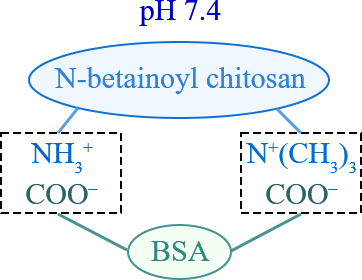
<style>
.page{position:relative;width:362px;height:280px;background:#ffffff}
.page>*{position:absolute;margin:0}
.t1{font:30px "TimesNewRomanPSMT";color:#0000cc}
.t2{font:30px "TimesNewRomanPSMT";color:#2d81d7}
.t3{font:30px "TimesNewRomanPSMT";color:#0066cc}
.t4{font:30px "TimesNewRomanPSMT";color:#006dd0}
.t5{font:30px "TimesNewRomanPSMT";color:#286666}
.t6{font:30px "TimesNewRomanPSMT";color:#2f897d}
</style>
<div class="page">
<p class="t1" style="left:139px;top:0px;width:82px;height:26px">pH 7.4</p>
<p class="t2" style="left:54px;top:67px;width:252px;height:27px">N-betainoyl chitosan</p>
<p class="t3" style="left:31px;top:143px;width:62px;height:30px">NH3+</p>
<p class="t4" style="left:246px;top:143px;width:110px;height:30px">N+(CH3)3</p>
<p class="t5" style="left:26px;top:184px;width:72px;height:20px">COO–</p>
<p class="t5" style="left:266px;top:184px;width:72px;height:20px">COO–</p>
<p class="t6" style="left:151px;top:241px;width:59px;height:20px">BSA</p>
</div>
